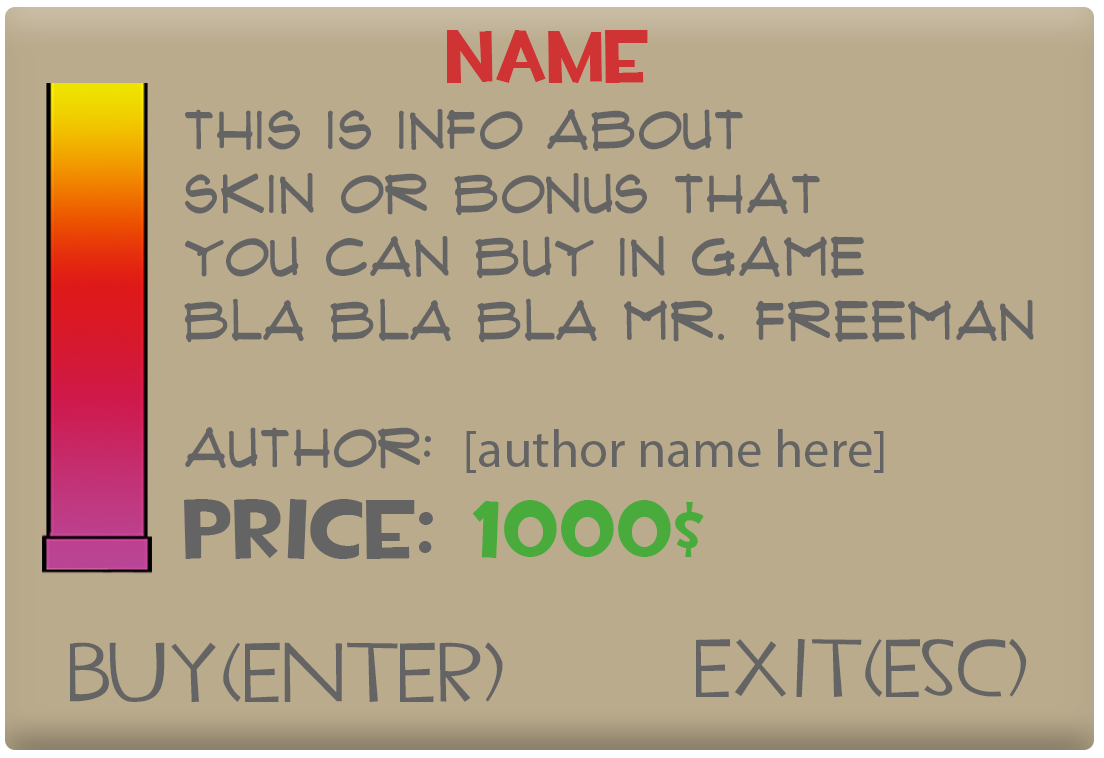
<style>
.page{position:relative;width:1104px;height:758px;background:#baab8d}
.page>*{position:absolute;margin:0}
.t1{font:75px "TF2Build";color:#d03333}
.t2{font:53.1px "FluxArchitect";color:#646464}
.t3{font:53.1px "MyriadPro-Regular";color:#646464}
.t4{font:85px "TF2Build";color:#646464}
.t5{font:85px "TF2Build";color:#49ab3c}
.t6{font:82.6px "TF2Secondary";color:#646464}
.t7{font:84.6px "TF2Secondary";color:#646464}
</style>
<div class="page">
<p class="t1" style="left:447px;top:30px;width:201px;height:53px">Name</p>
<p class="t2" style="left:184px;top:109px;width:850px;height:364px">This is info about<br>skin or bonus that<br>you can buy in game<br>bla bla bla mr. Freeman<br><br>Author: <span class="t3">[author name here]</span></p>
<p class="t4" style="left:184px;top:499px;width:520px;height:60px">PRICE: <span class="t5">1000$</span></p>
<p class="t6" style="left:696px;top:638px;width:331px;height:59px">EXIT(ESC)</p>
<p class="t7" style="left:70px;top:642px;width:433px;height:60px">BUY(ENTER)</p>
</div>
